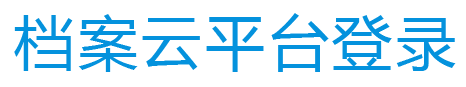
<style>
.page{position:relative;width:466px;height:87px;background:#ffffff}
.page>*{position:absolute;margin:0}
.t1{font:60px "MicrosoftYaHei";letter-spacing:0.06em;color:#0492dd}
</style>
<div class="page">
<p class="t1" style="left:14px;top:13px;width:442px;height:59px">档案云平台登录</p>
</div>
